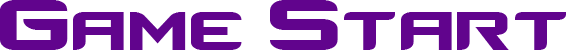
<style>
.page{position:relative;width:566px;height:50px;background:#ffffff}
.page>*{position:absolute;margin:0}
.t1{font:100px "Counter-StrikeRegular";color:#61048d}
</style>
<div class="page">
<p class="t1" style="left:0px;top:0px;width:566px;height:50px">Game Start</p>
</div>
